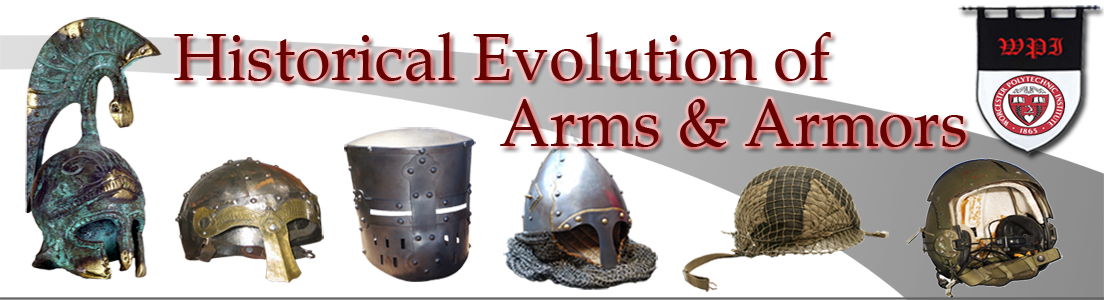
<style>
.page{position:relative;width:1104px;height:300px;background:#ffffff}
.page>*{position:absolute;margin:0}
.t1{font:66px "BookAntiqua";color:#660202}
</style>
<div class="page">
<p class="t1" style="left:174px;top:32px;width:792px;height:115px">Historical Evolution of <br>                     Arms &amp; Armors</p>
</div>
